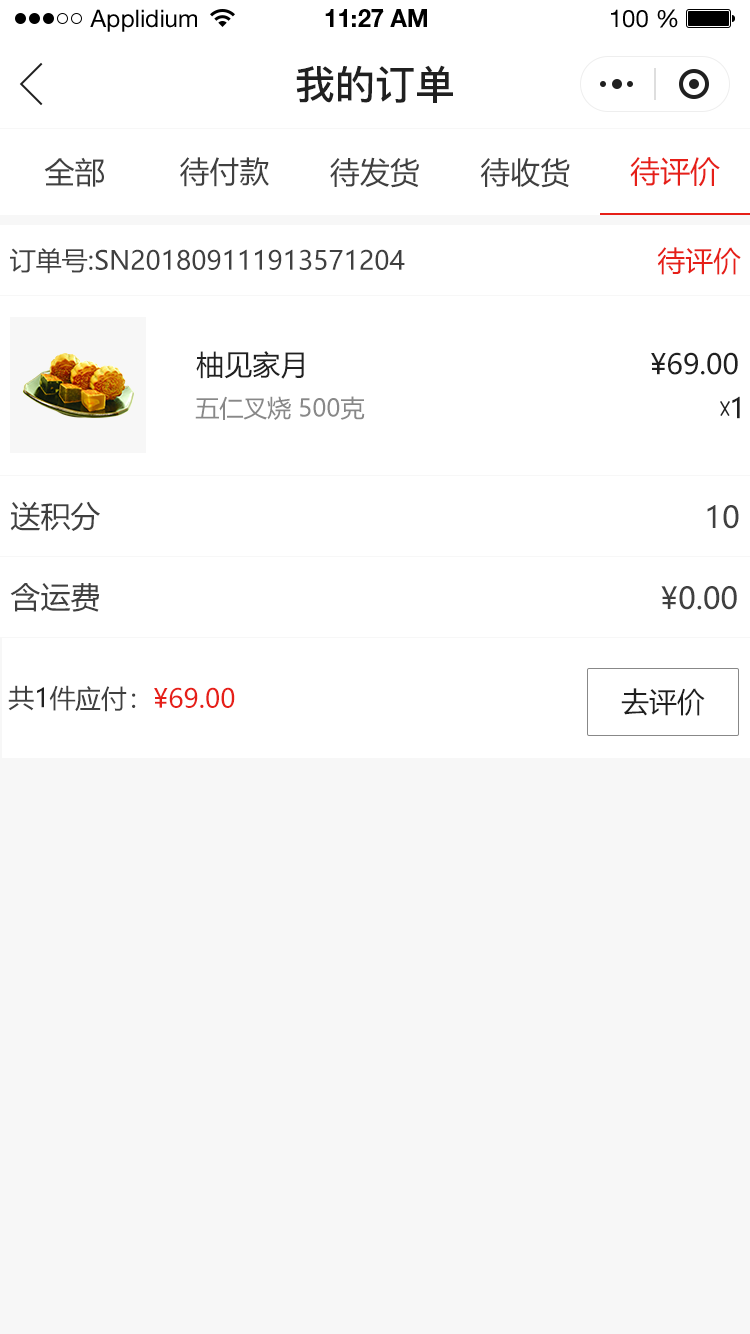
<style>
.page{position:relative;width:750px;height:1334px;background:#ffffff}
.page>*{position:absolute;margin:0}
.t1{font:24px "HelveticaNeueLTStd-Roman";color:#000000}
.t2{font:24px "HelveticaNeueLTStd-Bd";color:#000000}
.t3{font:40px "PingFang-SC-Bold";color:#202020;text-transform:uppercase}
.t4{font:30px "MicrosoftYaHei";color:#404040;text-transform:uppercase}
.t5{font:30px "MicrosoftYaHei";color:#e61f18;text-transform:uppercase}
.t6{font:26px "MicrosoftYaHei";color:#404040;text-transform:uppercase}
.t7{font:28px "MicrosoftYaHei";color:#e61f18;text-transform:uppercase}
.t8{font:28px "MicrosoftYaHei";color:#202020;text-transform:uppercase}
.t9{font:24px "MicrosoftYaHei";color:#888888;text-transform:uppercase}
.t10{font:26px "MicrosoftYaHei";color:#202020;text-transform:uppercase}
.t11{font:26px "MicrosoftYaHei";color:#e61f18;text-transform:uppercase}
</style>
<div class="page">
<p class="t1" style="left:90px;top:9px;width:107px;height:23px">Applidium</p>
<p class="t2" style="left:325px;top:9px;width:102px;height:18px">11:27 AM</p>
<p class="t1" style="left:611px;top:9px;width:67px;height:19px">100 %</p>
<p class="t3" style="left:296px;top:65px;width:157px;height:38px">我的订单</p>
<p class="t4" style="left:44px;top:157px;width:60px;height:30px">全部</p>
<p class="t4" style="left:180px;top:157px;width:89px;height:30px">待付款</p>
<p class="t4" style="left:330px;top:157px;width:89px;height:31px">待发货</p>
<p class="t4" style="left:480px;top:158px;width:90px;height:30px">待收货</p>
<p class="t5" style="left:630px;top:157px;width:90px;height:30px">待评价</p>
<p class="t6" style="left:10px;top:248px;width:395px;height:26px">订单号:sn201809111913571204</p>
<p class="t7" style="left:657px;top:247px;width:84px;height:28px">待评价</p>
<p class="t8" style="left:196px;top:351px;width:108px;height:28px">柚见家月</p>
<p class="t8" style="left:651px;top:352px;width:87px;height:23px">¥69.00</p>
<p class="t9" style="left:195px;top:396px;width:170px;height:24px">五仁叉烧 500克</p>
<p class="t8" style="left:732px;top:396px;width:8px;height:23px">1</p>
<p class="t4" style="left:10px;top:501px;width:90px;height:30px">送积分</p>
<p class="t4" style="left:707px;top:505px;width:32px;height:24px">10</p>
<p class="t4" style="left:10px;top:583px;width:89px;height:29px">含运费</p>
<p class="t4" style="left:661px;top:586px;width:76px;height:24px">¥0.00</p>
<p class="t6" style="left:8px;top:685px;width:68px;height:26px">共<span class="t10">1</span>件</p>
<p class="t11" style="left:75px;top:686px;width:160px;height:26px"><span class="t6">应付：</span>¥69.00</p>
<p class="t8" style="left:621px;top:688px;width:84px;height:28px">去评价</p>
</div>
